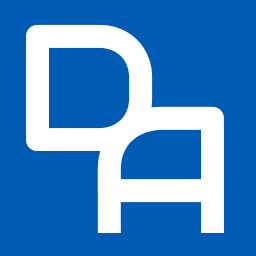
<style>
.page{position:relative;width:256px;height:256px;background:#005bb4}
.page>*{position:absolute;margin:0}
.t1{font:180px "Audiowide-Regular";color:#ffffff}
</style>
<div class="page">
<p class="t1" style="left:26px;top:24px;width:127px;height:127px">D</p>
<p class="t1" style="left:97px;top:106px;width:127px;height:127px">A</p>
</div>
